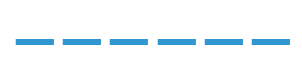
<style>
.page{position:relative;width:302px;height:83px;background:#ffffff}
.page>*{position:absolute;margin:0}
.t1{font:82px "LucidaSansUnicode";letter-spacing:-0.03em;color:#3097d1;font-weight:bold}
</style>
<div class="page">
<p class="t1" style="left:15px;top:39px;width:275px;height:6px">------</p>
<p class="t1" style="left:15px;top:39px;width:275px;height:6px">------</p>
</div>
